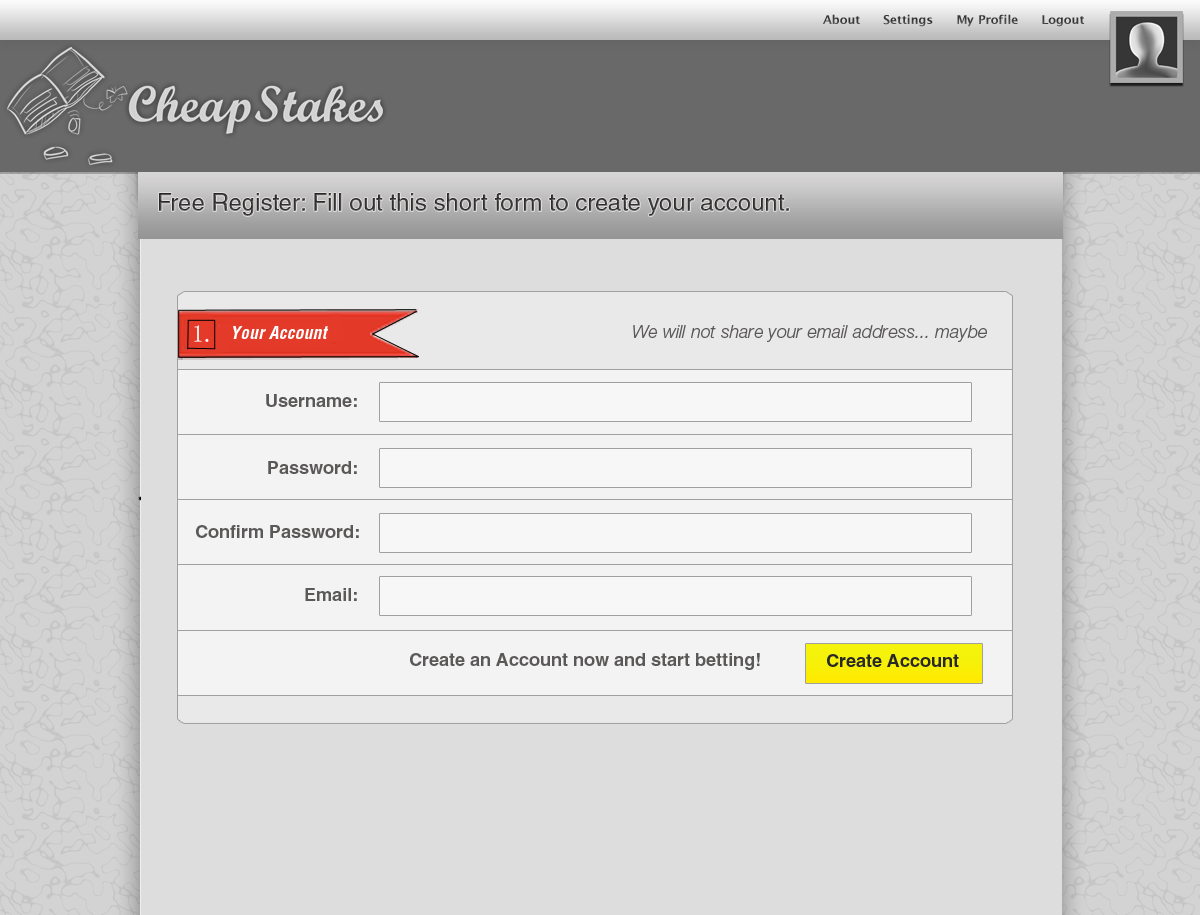
<style>
.page{position:relative;width:1200px;height:915px;background:#dddddd}
.page>*{position:absolute;margin:0}
.t1{font:24px "HelveticaLTStd-Roman";color:#373737}
.t2{font:24px "SimSun-ExtB";color:#ffffff}
.t3{font:18px "HelveticaLTStd-BoldCondObl";color:#ffffff}
.t4{font:18px "HelveticaNeueLTPro-LtIt";color:#5b5858}
.t5{font:18px "HelveticaLTStd-Bold";color:#5b5858}
.t6{font:18px "HelveticaLTStd-Bold";color:#282828}
</style>
<div class="page">
<p class="t1" style="left:159px;top:193px;width:630px;height:23px">Free Register: Fill out this short form to create your account.</p>
<p class="t2" style="left:194px;top:325px;width:15px;height:17px">1.</p>
<p class="t3" style="left:233px;top:326px;width:96px;height:13px">Your Account</p>
<p class="t4" style="left:633px;top:325px;width:354px;height:17px">We will not share your email address... maybe</p>
<p class="t5" style="left:266px;top:394px;width:91px;height:13px">Username:</p>
<p class="t5" style="left:268px;top:461px;width:89px;height:13px">Password:</p>
<p class="t5" style="left:196px;top:525px;width:163px;height:13px">Confirm Password:</p>
<p class="t5" style="left:305px;top:588px;width:52px;height:13px">Email:</p>
<p class="t5" style="left:410px;top:653px;width:350px;height:17px">Create an Account now and start betting!</p>
<p class="t6" style="left:827px;top:654px;width:132px;height:13px">Create Account</p>
</div>
